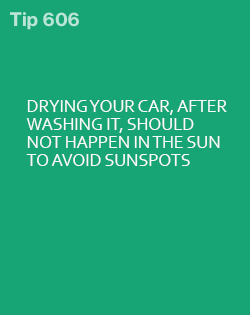
<style>
.page{position:relative;width:250px;height:315px;background:#18a576}
.page>*{position:absolute;margin:0}
.t1{font:18px/18px "Corbel";letter-spacing:-0.01em;color:#fbfbfb}
</style>
<div class="page">
<p class="t1" style="left:26px;top:100px;width:201px;height:66px">DRYING YOUR CAR, AFTER<br>WASHING IT, SHOULD <br>NOT HAPPEN IN THE SUN <br>TO AVOID SUNSPOTS</p>
</div>
